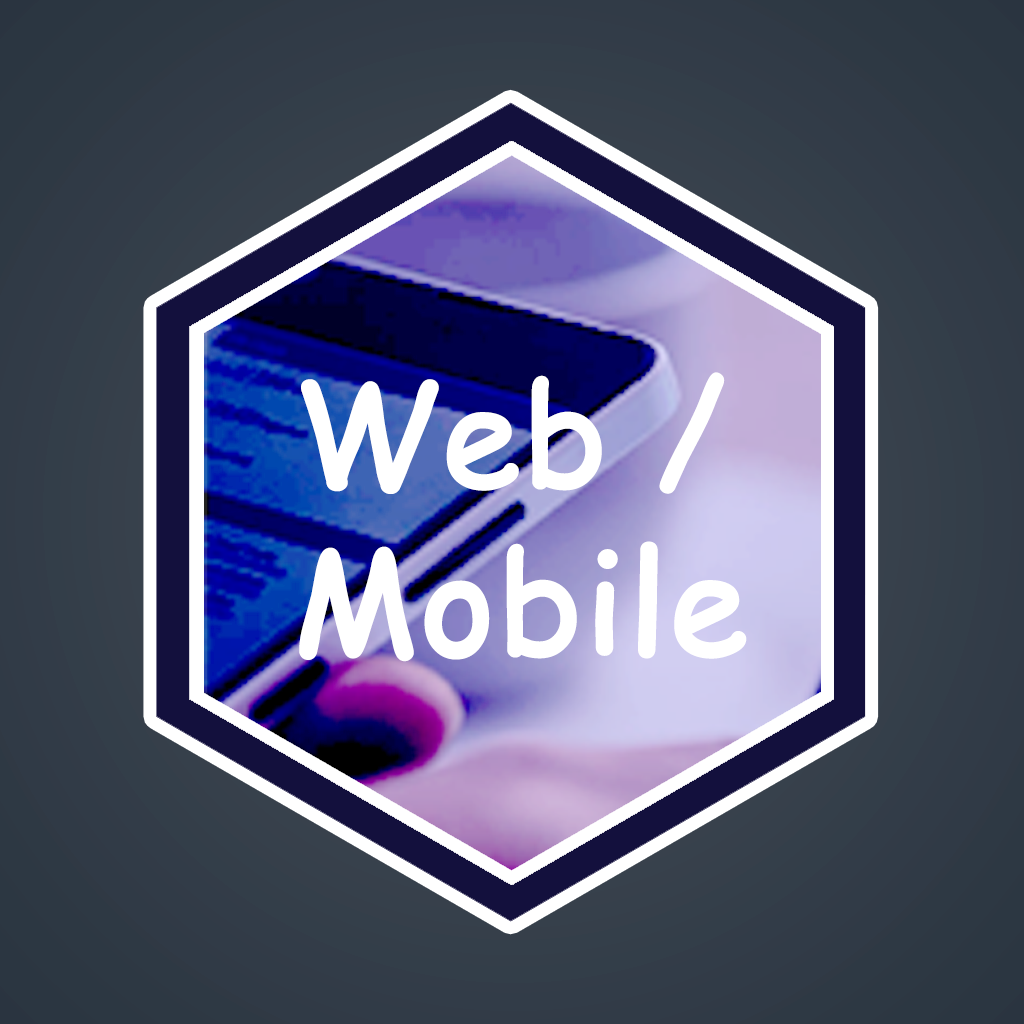
<style>
.page{position:relative;width:1024px;height:1024px}
.page>*{position:absolute;margin:0}
.t1{font:140px "ComicSansMS";color:#ffffff;font-weight:bold}
</style>
<div class="page">
<p class="t1" style="left:299px;top:372px;width:448px;height:290px">Web /<br>Mobile</p>
</div>
